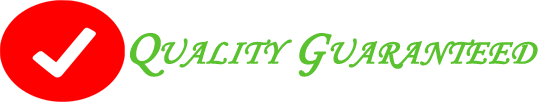
<style>
.page{position:relative;width:550px;height:102px;background:#ffffff}
.page>*{position:absolute;margin:0}
.t1{font:50px "MonotypeCorsiva";color:#5ac22e;font-variant:small-caps;font-weight:bold;font-style:italic}
</style>
<div class="page">
<p class="t1" style="left:130px;top:33px;width:408px;height:44px">Quality Guaranteed</p>
</div>
